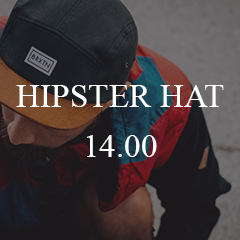
<style>
.page{position:relative;width:240px;height:240px}
.page>*{position:absolute;margin:0}
.t1{font:33.3px/50px "TimesNewRomanPSMT";color:#ffffff}
</style>
<div class="page">
<p class="t1" style="left:16px;top:85px;width:208px;height:72px;text-align:center">HIPSTER HAT<br>14.00</p>
</div>
